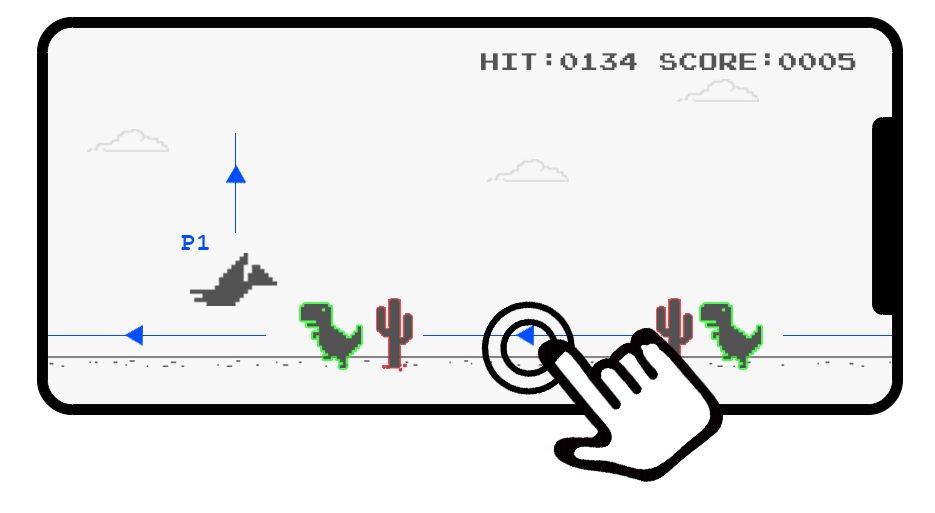
<style>
.page{position:relative;width:935px;height:513px;background:#f7f7f7}
.page>*{position:absolute;margin:0}
.t1{font:24px "JoystixMonospace-Regular";color:#535353}
.t2{font:25px "FreeMonoBold";color:#004eff}
</style>
<div class="page">
<p class="t1" style="left:481px;top:53px;width:375px;height:17px">HIT:0134 SCORE:0005</p>
<p class="t2" style="left:181px;top:235px;width:28px;height:15px">P1</p>
</div>
